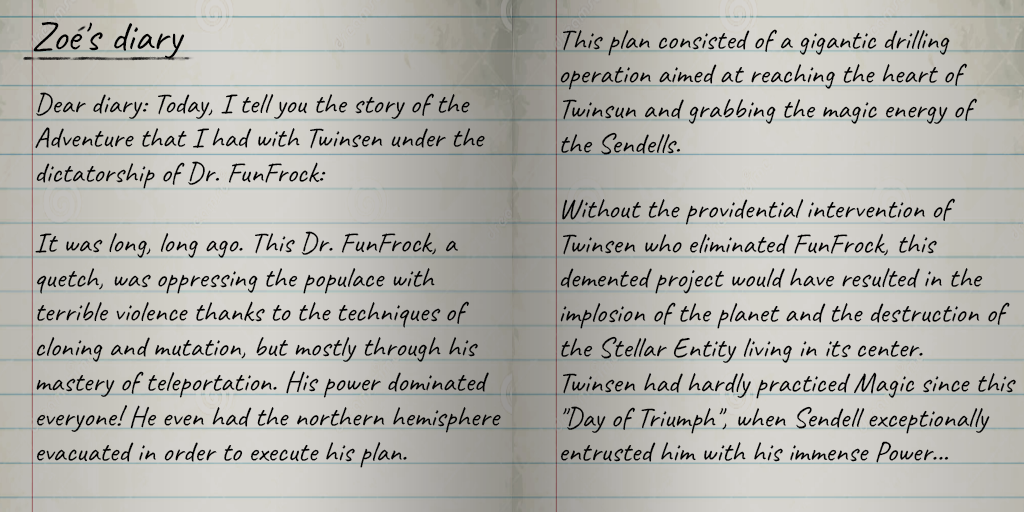
<style>
.page{position:relative;width:1024px;height:512px}
.page>*{position:absolute;margin:0}
.t1{font:42px "Caveat-Regular";color:#000000}
.t2{font:29px "Caveat-Regular";color:#000000}
</style>
<div class="page">
<p class="t1" style="left:33px;top:22px;width:152px;height:37px">Zoe's diary</p>
<p class="t2" style="left:560px;top:29px;width:456px;height:434px">This plan consisted of a gigantic drilling operation aimed at reaching the heart of Twinsun and grabbing the magic energy of <br>the Sendells. <br> <br>Without the providential intervention of Twinsen who eliminated FunFrock, this demented project would have resulted in the implosion of the planet and the destruction of the Stellar Entity living in its center.<br>Twinsen had hardly practiced Magic since this "Day of Triumph", when Sendell exceptionally entrusted him with his immense Power...</p>
<p class="t2" style="left:35px;top:92px;width:466px;height:376px">Dear diary: Today, I tell you the story of the Adventure that I had with Twinsen under the dictatorship of Dr. FunFrock:<br> <br>It was long, long ago. This Dr. FunFrock, a quetch, was oppressing the populace with terrible violence thanks to the techniques of cloning and mutation, but mostly through his mastery of teleportation. His power dominated everyone! He even had the northern hemisphere evacuated in order to execute his plan.</p>
</div>
